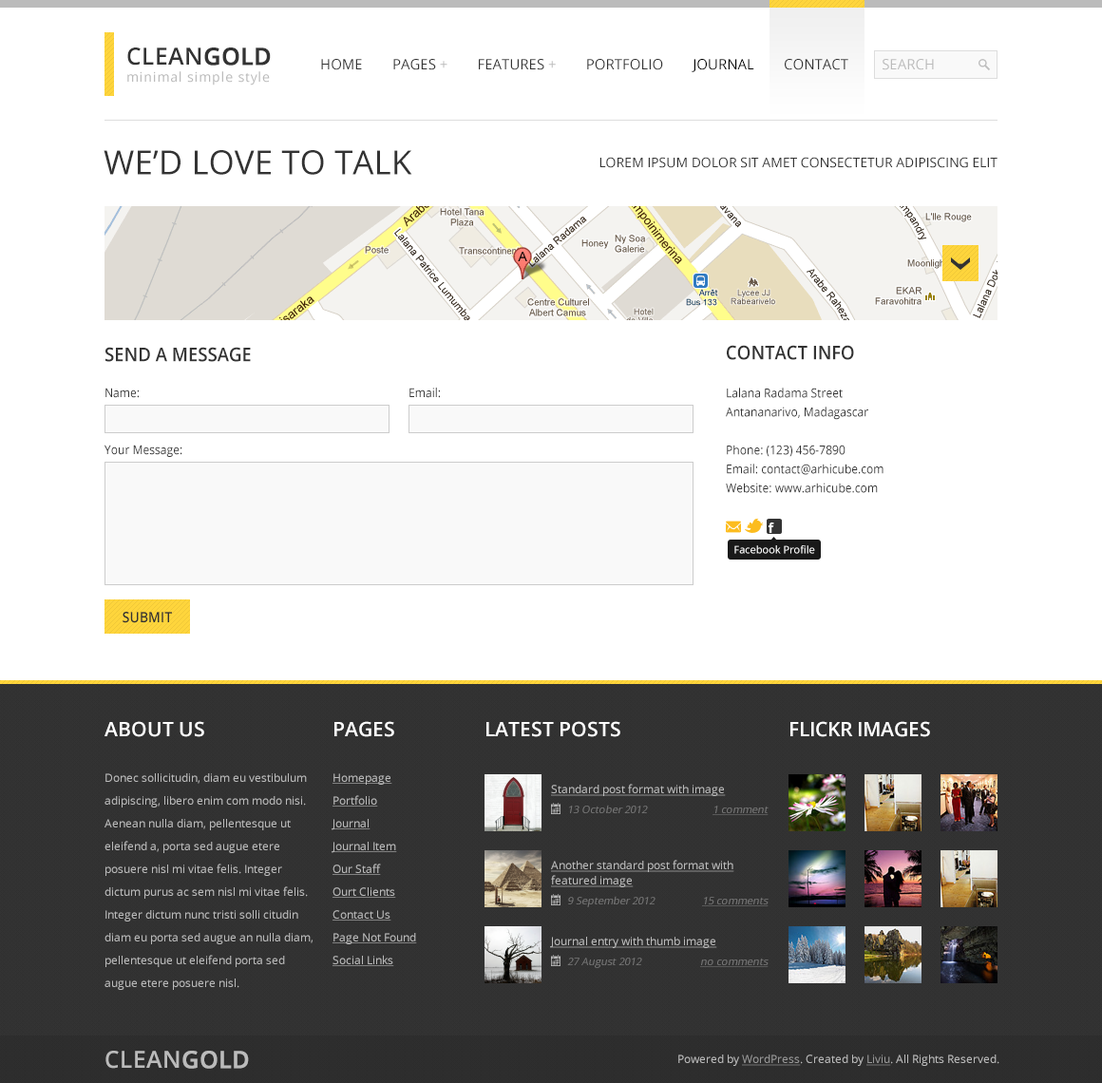
<style>
.page{position:relative;width:1102px;height:1083px;background:#ffffff}
.page>*{position:absolute;margin:0}
.t1{font:13.3px/17.1px "OpenSans";letter-spacing:0.045em;color:#bbbbbb}
.t2{font:23.7px/17.1px "OpenSans-Semibold";color:#333333;text-transform:uppercase}
.t3{font:23.7px/17.1px "OpenSans-Semibold";color:#333333;text-transform:uppercase;font-weight:bold}
.t4{font:14.2px "OpenSans";color:#333333;text-transform:uppercase}
.t5{font:14.2px "OpenSans";color:#bbbbbb;text-transform:uppercase}
.t6{font:14.2px "OpenSans";color:#000000;text-transform:uppercase}
.t7{font:33.2px "OpenSans";color:#333333;text-transform:uppercase}
.t8{font:13.3px "OpenSans";color:#333333;text-transform:uppercase}
.t9{font:19px "OpenSans-Semibold";color:#333333;text-transform:uppercase;scale:0.93 1}
.t10{font:12.3px/19px "OpenSans";color:#333333;scale:0.93 1}
.t11{font:19px/19px "OpenSans-Semibold";color:#333333;text-transform:uppercase;scale:0.93 1}
.t12{font:12.3px "OpenSans";color:#333333;scale:0.93 1}
.t13{font:10.4px "OpenSans";color:#ffffff}
.t14{font:14.2px "OpenSans-Semibold";color:#333333;text-transform:uppercase;scale:0.93 1}
.t15{font:11.4px/22.8px "OpenSans";color:#bbbbbb}
.t16{font:19.9px/22.8px "OpenSans-Semibold";color:#fefefe;text-transform:uppercase}
.t17{font:11.4px/22.8px "OpenSans";color:#bbbbbb;text-decoration:underline}
.t18{font:19.9px "OpenSans-Semibold";color:#fefefe;text-transform:uppercase}
.t19{font:11.4px "OpenSans";color:#bbbbbb;text-decoration:underline}
.t20{font:10.4px "OpenSans";color:#777777;font-style:italic}
.t21{font:10.4px "OpenSans";color:#777777;font-style:italic;text-decoration:underline}
.t22{font:11.4px/15.2px "OpenSans";color:#bbbbbb;text-decoration:underline}
.t23{font:23.7px "OpenSans-Semibold";color:#bbbbbb;text-transform:uppercase}
.t24{font:23.7px "OpenSans-Semibold";color:#bbbbbb;text-transform:uppercase;font-weight:bold}
.t25{font:11.4px "OpenSans";color:#bbbbbb}
.t26{font:11.4px "OpenSans";color:#999999;text-decoration:underline}
</style>
<div class="page">
<p class="t1" style="left:127px;top:47px;width:144px;height:38px"><span class="t2">Clean</span><span class="t3">Gold<br></span>minimal simple style</p>
<p class="t4" style="left:321px;top:59px;width:527px;height:13px">Home        Pages <span class="t5">+</span>        Features <span class="t5">+</span>        Portfolio        <span class="t6">JOURNAL</span>        Contact</p>
<p class="t5" style="left:882px;top:59px;width:51px;height:11px">Search</p>
<p class="t7" style="left:104px;top:150px;width:308px;height:25px">We’d love to talk</p>
<p class="t8" style="left:599px;top:157px;width:398px;height:11px">Lorem ipsum dolor sit amet consectetur adipiscing elit</p>
<p class="t9" style="left:105px;top:347px;width:146px;height:15px">Send a message</p>
<p class="t10" style="left:725px;top:345px;width:158px;height:148px"><span class="t11">Contact info<br><br></span>Lalana Radama Street<br>Antananarivo, Madagascar<br><br>Phone: (123) 456-7890<br>Email: contact@arhicube.com<br>Website: www.arhicube.com</p>
<p class="t10" style="left:104px;top:387px;width:78px;height:70px;text-align:justify">Name:<br><br><br>Your Message:</p>
<p class="t12" style="left:409px;top:387px;width:31px;height:11px">Email:</p>
<p class="t13" style="left:734px;top:545px;width:81px;height:9px">Facebook Profile</p>
<p class="t14" style="left:122px;top:612px;width:50px;height:11px">Submit</p>
<p class="t15" style="left:104px;top:721px;width:208px;height:268px"><span class="t16">About US<br><br></span>Donec sollicitudin, diam eu vestibulum adipiscing, libero enim com modo nisi. Aenean nulla diam, pellentesque ut eleifend a, porta sed augue etere posuere nisl mi vitae felis. Integer dictum purus ac sem nisl mi vitae felis. Integer dictum nunc tristi solli citudin diam eu porta sed augue an nulla diam, pellentesque ut eleifend porta sed augue etere posuere nisl.</p>
<p class="t17" style="left:331px;top:721px;width:86px;height:245px"><span class="t16">Pages<br><br></span>Homepage<br>Portfolio<br>Journal<br>Journal Item<br>Our Staff<br>Ourt Clients<br>Contact Us<br>Page Not Found<br>Social Links</p>
<p class="t18" style="left:486px;top:721px;width:134px;height:16px">Latest Posts</p>
<p class="t18" style="left:790px;top:721px;width:140px;height:16px">Flickr Images</p>
<p class="t19" style="left:551px;top:783px;width:174px;height:13px">Standard post format with image</p>
<p class="t20" style="left:569px;top:804px;width:79px;height:9px">13 October 2012</p>
<p class="t21" style="left:712px;top:805px;width:56px;height:10px">1 comment</p>
<p class="t22" style="left:551px;top:859px;width:183px;height:28px">Another standard post format with featured image</p>
<p class="t20" style="left:568px;top:895px;width:87px;height:12px">9 September 2012</p>
<p class="t21" style="left:702px;top:896px;width:66px;height:10px">15 comments</p>
<p class="t19" style="left:550px;top:936px;width:167px;height:12px">Journal entry with thumb image</p>
<p class="t20" style="left:567px;top:957px;width:75px;height:11px">27 August 2012</p>
<p class="t21" style="left:700px;top:957px;width:68px;height:10px">no comments</p>
<p class="t23" style="left:105px;top:1050px;width:144px;height:18px">Clean<span class="t24">gold</span></p>
<p class="t25" style="left:678px;top:1054px;width:321px;height:11px">Powered by <span class="t26">WordPress</span>. Created by <span class="t26">Liviu</span>. All Rights Reserved.</p>
</div>
